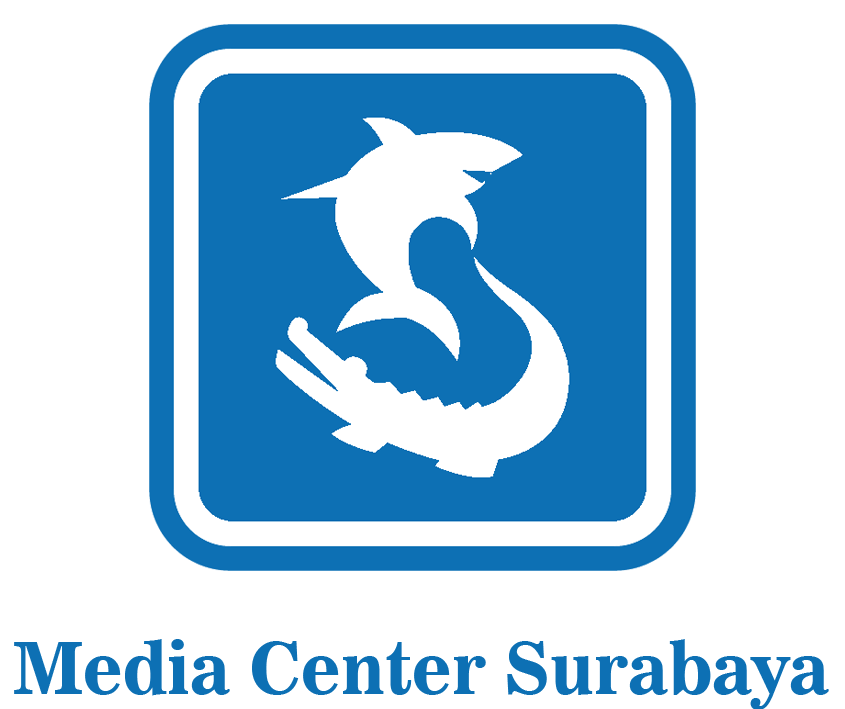
<style>
.page{position:relative;width:845px;height:709px;background:#ffffff}
.page>*{position:absolute;margin:0}
.t1{font:71.2px "News706BT-BoldC";color:#0d70b4}
</style>
<div class="page">
<p class="t1" style="left:14px;top:639px;width:815px;height:71px">Media Center Surabaya</p>
</div>
